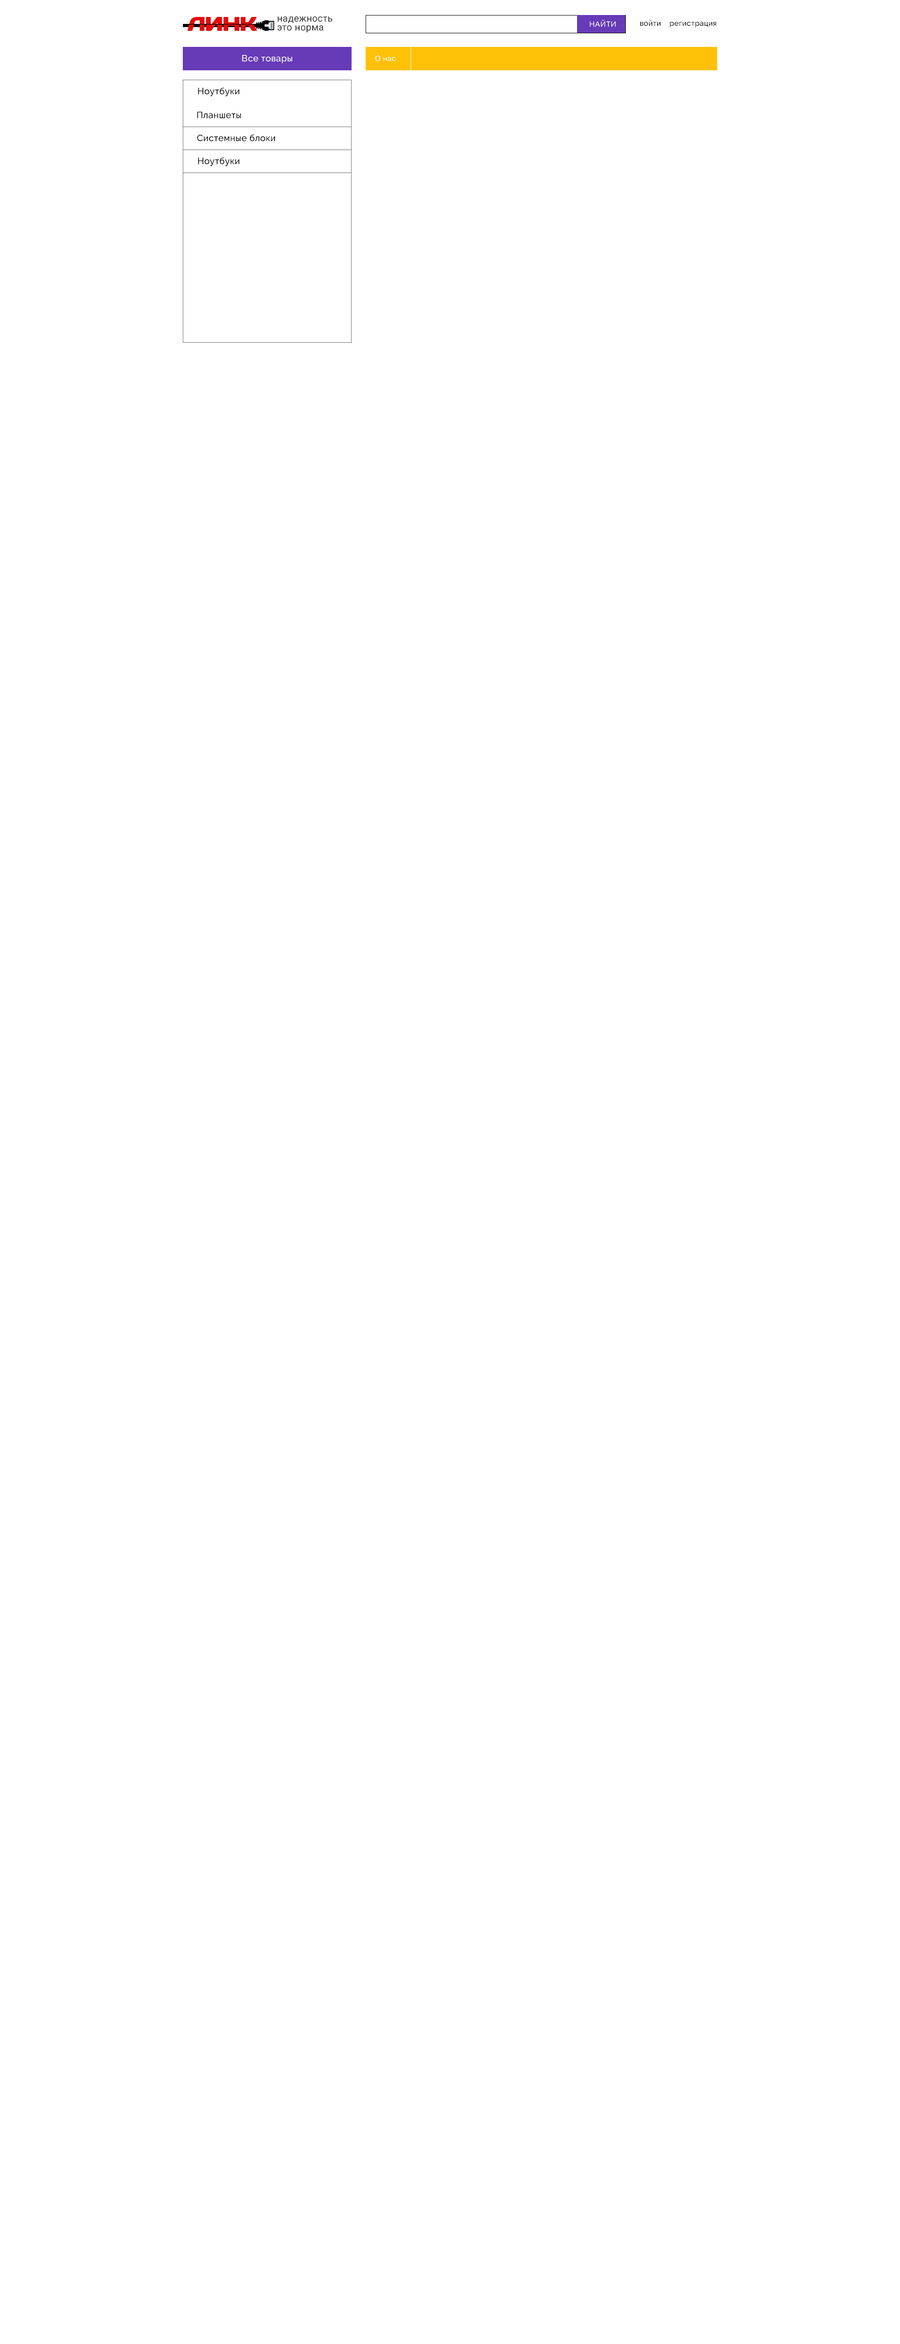
<style>
.page{position:relative;width:900px;height:2344px;background:#ffffff}
.page>*{position:absolute;margin:0}
.t1{font:9.4px/9px "Roboto-Regular";letter-spacing:0.02em;color:#303030}
.t2{font:7.5px "Raleway-Medium";letter-spacing:0.02em;color:#fefefe}
.t3{font:7.5px "Raleway-Medium";letter-spacing:0.02em;color:#010101}
.t4{font:9px "Raleway-Medium";letter-spacing:0.02em;color:#fefefe}
.t5{font:9px "Raleway-Medium";letter-spacing:0.02em;color:#000000}
</style>
<div class="page">
<p class="t1" style="left:277px;top:16px;width:55px;height:16px">надежность<br>это норма</p>
<p class="t2" style="left:590px;top:20px;width:26px;height:7px">НАЙТИ</p>
<p class="t3" style="left:640px;top:20px;width:76px;height:8px">войти    регистрация</p>
<p class="t4" style="left:242px;top:55px;width:50px;height:8px">Все товары</p>
<p class="t2" style="left:375px;top:55px;width:21px;height:6px">О нас</p>
<p class="t5" style="left:198px;top:87px;width:42px;height:10px">Ноутбуки</p>
<p class="t5" style="left:197px;top:112px;width:44px;height:7px">Планшеты</p>
<p class="t5" style="left:197px;top:134px;width:78px;height:8px">Системные блоки</p>
<p class="t5" style="left:198px;top:157px;width:42px;height:9px">Ноутбуки</p>
</div>
